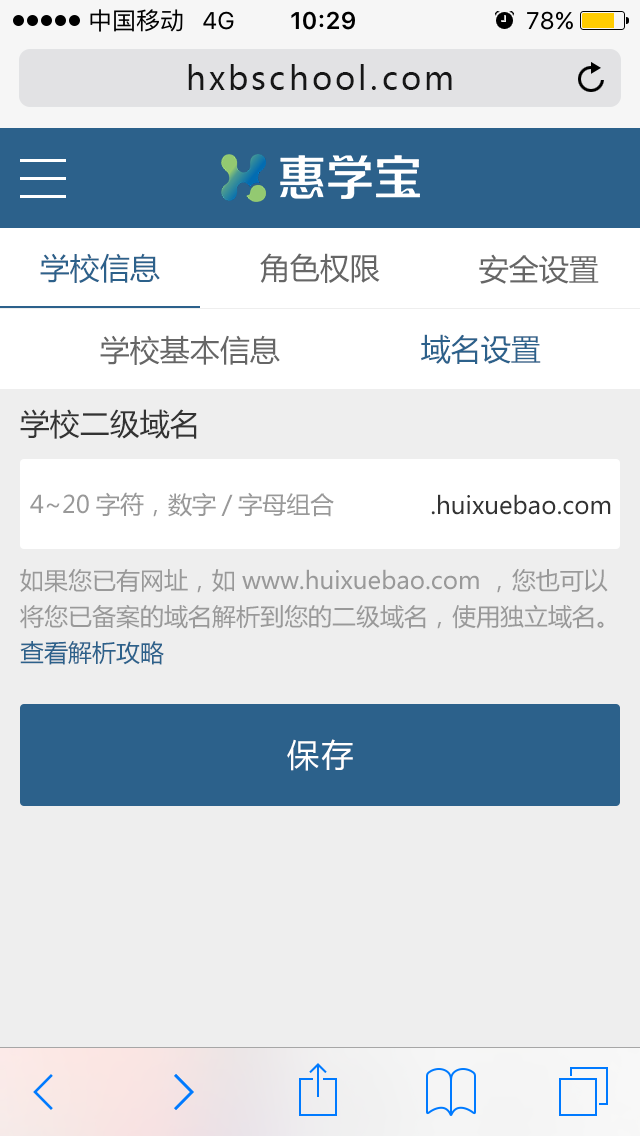
<style>
.page{position:relative;width:640px;height:1136px;background:#eeeeee}
.page>*{position:absolute;margin:0}
.t1{font:32px "MicrosoftYaHei";letter-spacing:0.1em;color:#171717}
.t2{font:30px "MicrosoftYaHei";color:#2c618b}
.t3{font:30px "MicrosoftYaHei";color:#666666}
.t4{font:30px "MicrosoftYaHei";color:#333333}
.t5{font:24px "MicrosoftYaHei";color:#999999}
.t6{font:24px "MicrosoftYaHei";color:#333333}
.t7{font:24px/36px "MicrosoftYaHei";color:#999999}
.t8{font:24px/36px "MicrosoftYaHei";color:#2c618b}
.t9{font:32px "MicrosoftYaHei";letter-spacing:0.075em;color:#ffffff}
</style>
<div class="page">
<p class="t1" style="left:188px;top:64px;width:264px;height:26px">hxbschool.com</p>
<p class="t2" style="left:40px;top:253px;width:120px;height:30px">学校信息</p>
<p class="t3" style="left:260px;top:253px;width:120px;height:30px">角色权限</p>
<p class="t3" style="left:479px;top:254px;width:120px;height:30px">安全设置</p>
<p class="t3" style="left:100px;top:335px;width:180px;height:30px">学校基本信息</p>
<p class="t2" style="left:421px;top:334px;width:120px;height:30px">域名设置</p>
<p class="t4" style="left:20px;top:409px;width:177px;height:30px">学校二级域名</p>
<p class="t5" style="left:30px;top:492px;width:304px;height:25px">4~20字符，数字/字母组合</p>
<p class="t6" style="left:431px;top:494px;width:180px;height:21px">.huixuebao.com</p>
<p class="t7" style="left:20px;top:568px;width:588px;height:97px">如果您已有网址，如www.huixuebao.com ，您也可以<br>将您已备案的域名解析到您的二级域名，使用独立域名。<br><span class="t8">查看解析攻略</span></p>
<p class="t9" style="left:287px;top:739px;width:66px;height:32px">保存</p>
</div>
